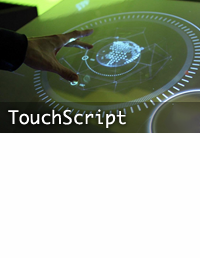
<style>
.page{position:relative;width:200px;height:258px;background:#fefefe}
.page>*{position:absolute;margin:0}
.t1{font:18px "Monaco";color:#ffffff}
</style>
<div class="page">
<p class="t1" style="left:8px;top:109px;width:118px;height:19px">TouchScript</p>
</div>
